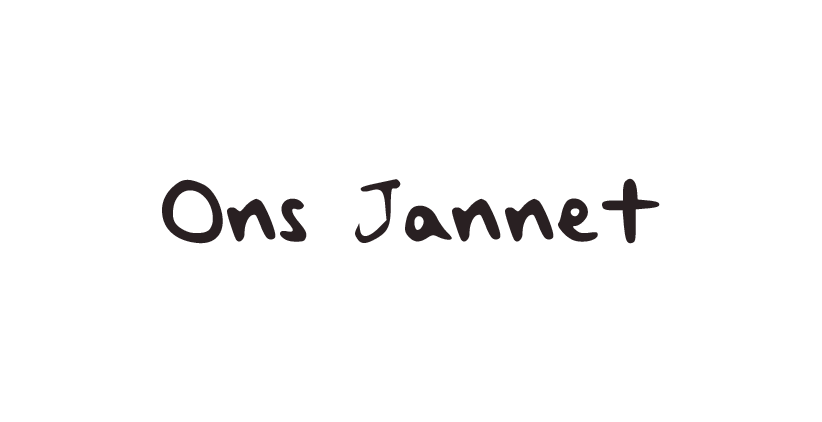
<style>
.page{position:relative;width:822px;height:422px;background:#ffffff}
.page>*{position:absolute;margin:0}
.t1{font:100px "TaylorSwiftHandwriting";letter-spacing:0.025em;color:#292022}
</style>
<div class="page">
<p class="t1" style="left:162px;top:178px;width:498px;height:66px">Ons Jannet</p>
</div>
